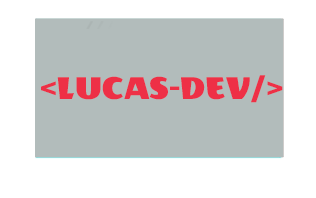
<style>
.page{position:relative;width:316px;height:198px;background:#b2bcbb}
.page>*{position:absolute;margin:0}
.t1{font:36px "WendyOne-Regular";letter-spacing:0.005em;color:#ee3046}
</style>
<div class="page">
<p class="t1" style="left:41px;top:75px;width:242px;height:28px">&lt;LUCAS-DEV/&gt;</p>
</div>
